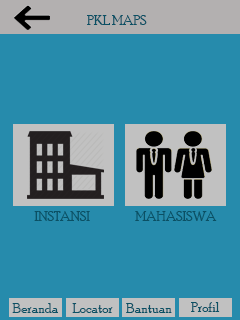
<style>
.page{position:relative;width:240px;height:320px;background:#268bac}
.page>*{position:absolute;margin:0}
.t1{font:14px "PoorRichard-Regular";color:#0b5064}
</style>
<div class="page">
<p class="t1" style="left:87px;top:15px;width:60px;height:10px">PKL MAPS</p>
<p class="t1" style="left:34px;top:211px;width:56px;height:10px">INSTANSI</p>
<p class="t1" style="left:135px;top:211px;width:82px;height:10px">MAHASISWA</p>
<p class="t1" style="left:12px;top:303px;width:46px;height:10px">Beranda</p>
<p class="t1" style="left:72px;top:303px;width:41px;height:10px">Locator</p>
<p class="t1" style="left:126px;top:303px;width:46px;height:10px">Bantuan</p>
<p class="t1" style="left:191px;top:302px;width:29px;height:10px">Profil</p>
</div>
